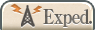
<style>
.page{position:relative;width:95px;height:30px}
.page>*{position:absolute;margin:0}
.t1{font:20px "RyuminPro-ExBold";letter-spacing:-0.08em;color:#6a6660;scale:0.9 1}
</style>
<div class="page">
<p class="t1" style="left:43px;top:9px;width:49px;height:18px">Exped.</p>
</div>
